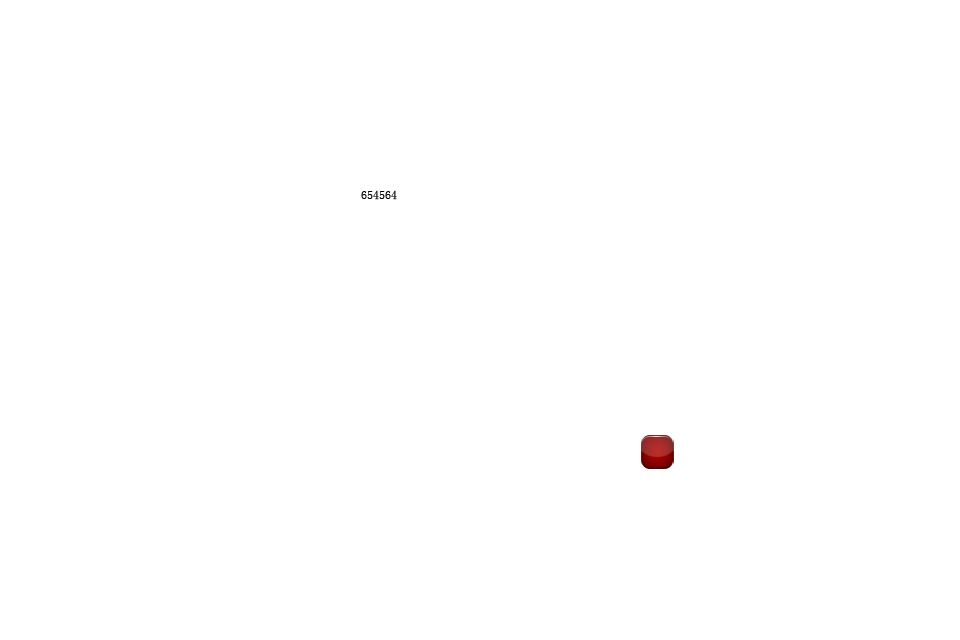
<style>
.page{position:relative;width:960px;height:640px;background:#ffffff}
.page>*{position:absolute;margin:0}
.t1{font:12px "SimSun";color:#000000}
</style>
<div class="page">
<p class="t1" style="left:361px;top:190px;width:36px;height:10px">654564</p>
</div>
